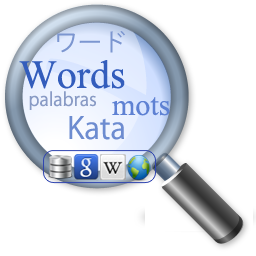
<style>
.page{position:relative;width:256px;height:256px;background:#ffffff}
.page>*{position:absolute;margin:0}
.t1{font:24px "KozGoPr6N-Regular";color:#7c96d0}
.t2{font:40px "TimesNewRomanPSMT";color:#335dbc}
.t3{font:18px "KozGoPr6N-Regular";color:#899bc5}
.t4{font:30px "TimesNewRomanPSMT";color:#5e81d3}
.t5{font:30px "KozGoPr6N-Regular";color:#6d8cd0}
</style>
<div class="page">
<p class="t1" style="left:57px;top:31px;width:68px;height:22px">ワード</p>
<p class="t2" style="left:19px;top:60px;width:106px;height:29px">Words</p>
<p class="t3" style="left:29px;top:91px;width:67px;height:19px">palabras</p>
<p class="t4" style="left:112px;top:97px;width:58px;height:19px">mots</p>
<p class="t5" style="left:69px;top:116px;width:55px;height:24px">Kata</p>
</div>
